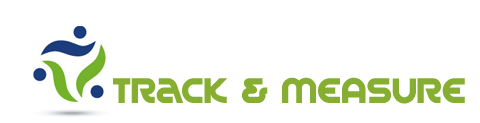
<style>
.page{position:relative;width:480px;height:123px;background:#ffffff}
.page>*{position:absolute;margin:0}
.t1{font:39px "SpinCycle";color:#86ae30}
</style>
<div class="page">
<p class="t1" style="left:113px;top:77px;width:352px;height:27px">TRack &amp; MEASURE</p>
</div>
